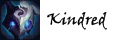
<style>
.page{position:relative;width:140px;height:40px;background:#ffffff}
.page>*{position:absolute;margin:0}
.t1{font:12px "VinerHandITC";color:#000000}
</style>
<div class="page">
<p class="t1" style="left:47px;top:12px;width:60px;height:18px">Kindred</p>
</div>
